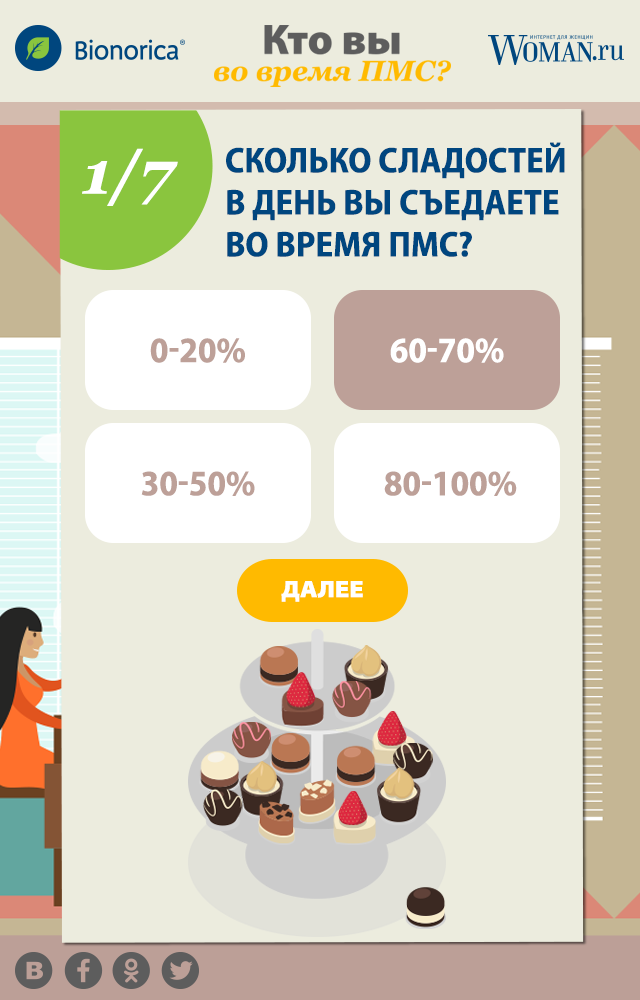
<style>
.page{position:relative;width:640px;height:1000px;background:#ececde}
.page>*{position:absolute;margin:0}
.t1{font:60px "Georgia-BoldItalic";color:#ffffff}
.t2{font:36px/42px "MyriadPro-BoldSemiCn";color:#00467f;text-transform:uppercase}
.t3{font:36px "MyriadPro-BoldSemiCn";color:#bda098;text-transform:uppercase}
.t4{font:36px "MyriadPro-BoldSemiCn";color:#ffffff;text-transform:uppercase}
.t5{font:24px "MyriadPro-BlackSemiExt";color:#ffffff;text-transform:uppercase}
</style>
<div class="page">
<p class="t1" style="left:82px;top:148px;width:96px;height:58px">1/7</p>
<p class="t2" style="left:226px;top:142px;width:339px;height:115px">Сколько сладостей в день вы съедаете во время ПМС?</p>
<p class="t3" style="left:150px;top:338px;width:95px;height:25px">0-20%</p>
<p class="t4" style="left:390px;top:338px;width:114px;height:25px">60-70%</p>
<p class="t3" style="left:141px;top:471px;width:114px;height:25px">30-50%</p>
<p class="t3" style="left:384px;top:471px;width:133px;height:25px">80-100%</p>
<p class="t5" style="left:281px;top:581px;width:82px;height:21px">далее</p>
</div>
